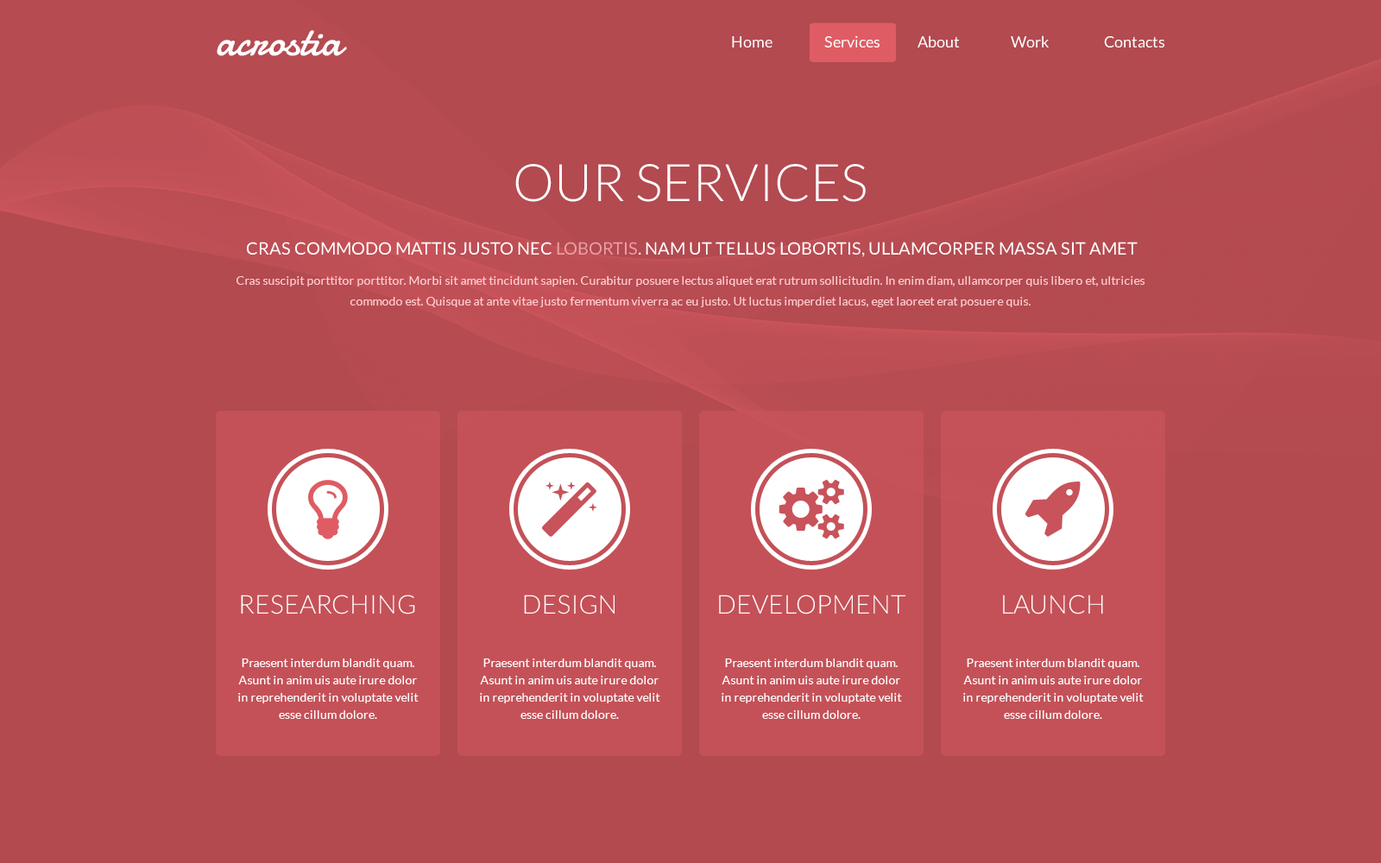
<style>
.page{position:relative;width:1381px;height:863px;background:#b24a50}
.page>*{position:absolute;margin:0}
.t1{font:43.2px "Damion";color:#ffffff}
.t2{font:15.5px "Lato-Regular";color:#ffffff}
.t3{font:51.8px "Lato-Light";color:#ffffff}
.t4{font:17.3px "Lato-Regular";color:#ffffff;text-transform:uppercase}
.t5{font:17.3px "Lato-Regular";color:#ec9da2;text-transform:uppercase}
.t6{font:12.1px/20.7px "Lato-Regular";color:#ffcccf}
.t7{font:25.9px "Lato-Light";color:#ffffff;text-transform:uppercase}
.t8{font:25.9px "Lato-Light";color:#ffffff}
.t9{font:12.1px/17.3px "Lato-Regular";color:#fefefe}
</style>
<div class="page">
<p class="t1" style="left:217px;top:30px;width:130px;height:26px">acrostia</p>
<p class="t2" style="left:732px;top:35px;width:433px;height:13px">Home  Services  About  Work  Contacts</p>
<p class="t3" style="left:515px;top:164px;width:351px;height:38px">OUR SERVICES</p>
<p class="t4" style="left:247px;top:242px;width:891px;height:15px">Cras commodo mattis justo nec <span class="t5">lobortis</span>. Nam ut tellus lobortis, ullamcorper massa sit amet</p>
<p class="t6" style="left:237px;top:276px;width:909px;height:31px;text-align:center">Cras suscipit porttitor porttitor. Morbi sit amet tincidunt sapien. Curabitur posuere lectus aliquet erat rutrum sollicitudin. In enim diam, ullamcorper quis libero et, ultricies commodo est. Quisque at ante vitae justo fermentum viverra ac eu justo. Ut luctus imperdiet lacus, eget laoreet erat posuere quis.</p>
<p class="t7" style="left:241px;top:595px;width:174px;height:20px">Researching</p>
<p class="t8" style="left:524px;top:595px;width:91px;height:20px">DESIGN</p>
<p class="t7" style="left:719px;top:595px;width:187px;height:20px">Development</p>
<p class="t7" style="left:1003px;top:595px;width:100px;height:20px">launch</p>
<p class="t9" style="left:238px;top:659px;width:181px;height:60px;text-align:center">Praesent interdum blandit quam. Asunt in anim uis aute irure dolor in reprehenderit in voluptate velit esse cillum dolore.</p>
<p class="t9" style="left:480px;top:659px;width:180px;height:60px;text-align:center">Praesent interdum blandit quam. Asunt in anim uis aute irure dolor in reprehenderit in voluptate velit esse cillum dolore.</p>
<p class="t9" style="left:722px;top:659px;width:180px;height:60px;text-align:center">Praesent interdum blandit quam. Asunt in anim uis aute irure dolor in reprehenderit in voluptate velit esse cillum dolore.</p>
<p class="t9" style="left:963px;top:659px;width:181px;height:60px;text-align:center">Praesent interdum blandit quam. Asunt in anim uis aute irure dolor in reprehenderit in voluptate velit esse cillum dolore.</p>
</div>
